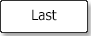
<style>
.page{position:relative;width:91px;height:36px;background:#ffffff}
.page>*{position:absolute;margin:0}
.t1{font:14px "Tahoma";color:#000000}
</style>
<div class="page">
<p class="t1" style="left:32px;top:9px;width:25px;height:12px">Last</p>
</div>
